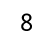
<style>
.page{position:relative;width:53px;height:41px;background:#ffffff}
.page>*{position:absolute;margin:0}
.t1{font:23.7px "DroidSans";color:#000000}
</style>
<div class="page">
<p class="t1" style="left:21px;top:13px;width:11px;height:18px">8</p>
</div>
